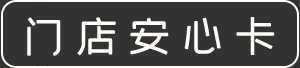
<style>
.page{position:relative;width:300px;height:68px;background:#333333}
.page>*{position:absolute;margin:0}
.t1{font:47px "zihun58hao-chuangzhonghei";letter-spacing:0.1em;color:#fffcf7;font-weight:bold}
</style>
<div class="page">
<p class="t1" style="left:27px;top:17px;width:248px;height:39px">门店安心卡</p>
</div>
